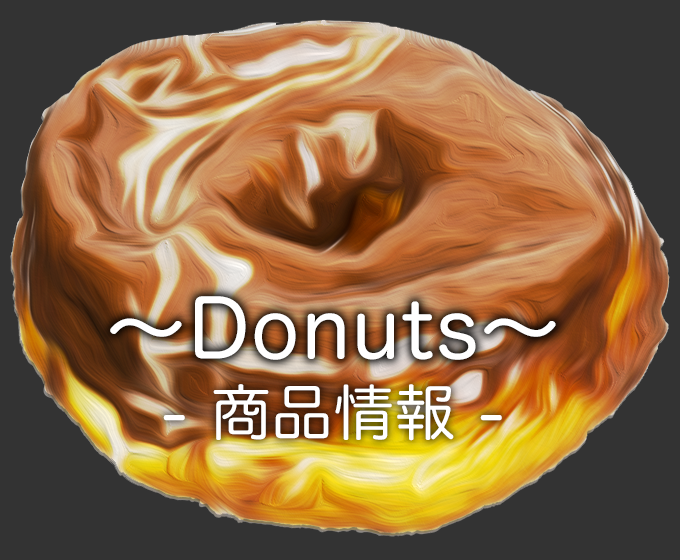
<style>
.page{position:relative;width:680px;height:560px;background:#333333}
.page>*{position:absolute;margin:0}
.t1{font:80px "HiraMaruProN-W4";letter-spacing:0.025em;color:#ffffff}
.t2{font:60px "HiraMaruProN-W4";letter-spacing:0.025em;color:#ffffff}
</style>
<div class="page">
<p class="t1" style="left:110px;top:296px;width:446px;height:64px">〜Donuts〜</p>
<p class="t2" style="left:163px;top:384px;width:339px;height:57px">- 商品情報 -</p>
</div>
